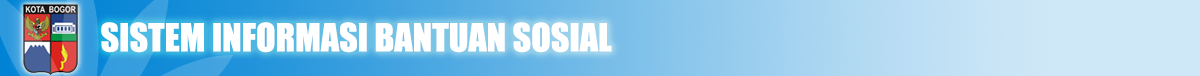
<style>
.page{position:relative;width:1200px;height:76px}
.page>*{position:absolute;margin:0}
.t1{font:36px "Impact";color:#ffffff}
</style>
<div class="page">
<p class="t1" style="left:101px;top:22px;width:511px;height:31px">SISTEM INFORMASI BANTUAN SOSIAL</p>
</div>
